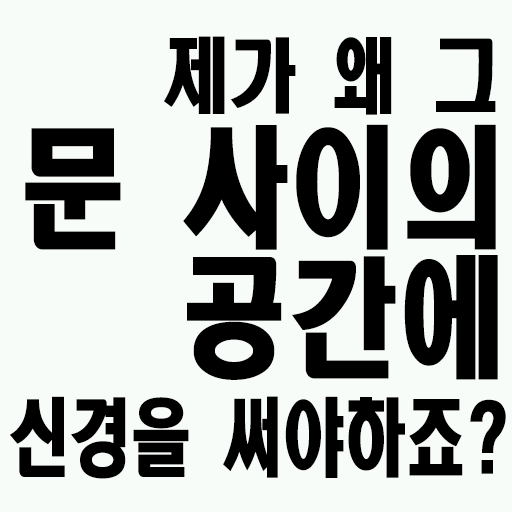
<style>
.page{position:relative;width:512px;height:512px;background:#f8fcf8}
.page>*{position:absolute;margin:0}
.t1{font:81px "HeadlineR-HM";color:#000000;scale:0.83 1}
.t2{font:129.6px/130px "HeadlineR-HM";color:#000000;scale:0.83 1}
.t3{font:84.6px "HeadlineR-HM";color:#000000;scale:0.72 1}
</style>
<div class="page">
<p class="t1" style="left:164px;top:36px;width:332px;height:79px">제가 왜 그</p>
<p class="t2" style="left:25px;top:124px;width:473px;height:256px;text-align:right">문 사이의<br>공간에</p>
<p class="t3" style="left:10px;top:396px;width:496px;height:83px">신경을 써야하죠?</p>
</div>
